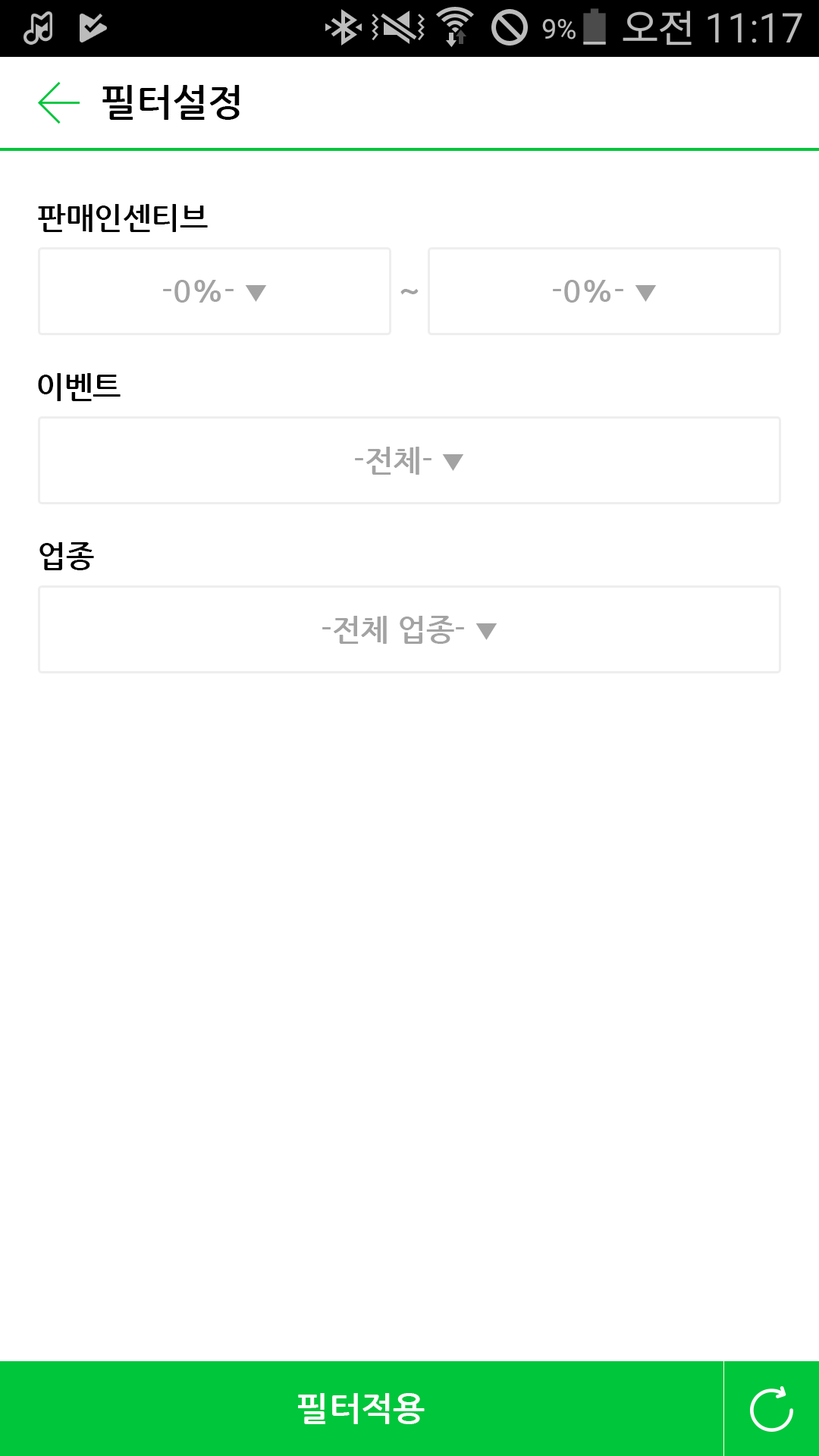
<style>
.page{position:relative;width:819px;height:1456px;background:#ffffff}
.page>*{position:absolute;margin:0}
.t1{font:37.9px "NanumGothicBold";color:#000000}
.t2{font:30.3px "NanumGothicBold";color:#000000}
.t3{font:30.3px "NanumGothicBold";color:#a3a3a3}
.t4{font:26.5px "NanumGothicBold";color:#a3a3a3}
.t5{font:34.1px "NanumGothicBold";color:#a3a3a3}
.t6{font:34.1px "NanumGothicBold";color:#ffffff}
</style>
<div class="page">
<p class="t1" style="left:102px;top:85px;width:138px;height:35px">필터설정</p>
<p class="t2" style="left:38px;top:204px;width:170px;height:28px">판매인센티브</p>
<p class="t3" style="left:163px;top:280px;width:104px;height:23px">-0%- <span class="t4">▼</span></p>
<p class="t3" style="left:553px;top:280px;width:104px;height:23px">-0%- <span class="t4">▼</span></p>
<p class="t5" style="left:400px;top:289px;width:19px;height:6px">~</p>
<p class="t2" style="left:38px;top:373px;width:83px;height:28px">이벤트</p>
<p class="t3" style="left:355px;top:447px;width:109px;height:28px">-전체- <span class="t4">▼</span></p>
<p class="t2" style="left:39px;top:542px;width:55px;height:28px">업종</p>
<p class="t3" style="left:322px;top:616px;width:175px;height:28px">-전체 업종- <span class="t4">▼</span></p>
<p class="t6" style="left:298px;top:1393px;width:127px;height:31px">필터적용</p>
</div>
